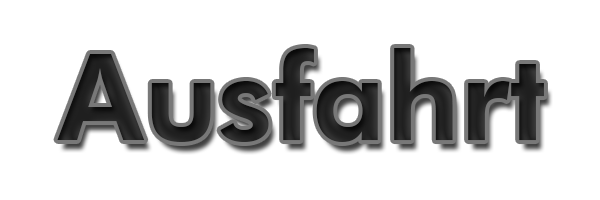
<style>
.page{position:relative;width:600px;height:200px;background:#ffffff}
.page>*{position:absolute;margin:0}
.t1{font:120px "FuturaBT-Heavy";color:#212121}
</style>
<div class="page">
<p class="t1" style="left:57px;top:48px;width:487px;height:94px">Ausfahrt</p>
</div>
